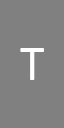
<style>
.page{position:relative;width:64px;height:128px;background:#808080}
.page>*{position:absolute;margin:0}
.t1{font:50px "Calibri";color:#feffff}
</style>
<div class="page">
<p class="t1" style="left:20px;top:48px;width:24px;height:32px">T</p>
</div>
